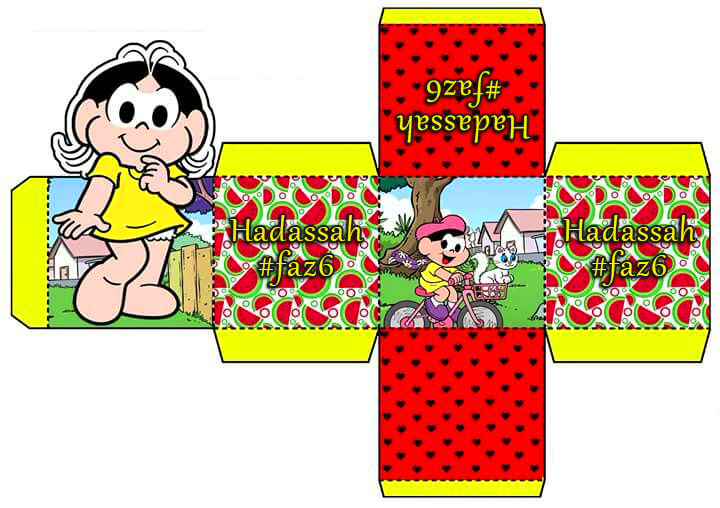
<style>
.page{position:relative;width:720px;height:508px;background:#ffffff}
.page>*{position:absolute;margin:0}
.t1{font:40px/35px "Gabriola";letter-spacing:0.04em;color:#f8ef07}
</style>
<div class="page">
<p class="t1" style="left:397px;top:71px;width:133px;height:72px;text-align:center;rotate:-180deg">Hadassah<br>#faz6</p>
<p class="t1" style="left:230px;top:215px;width:133px;height:71px;text-align:center">Hadassah<br>#faz6</p>
<p class="t1" style="left:563px;top:215px;width:133px;height:71px;text-align:center">Hadassah<br>#faz6</p>
</div>
